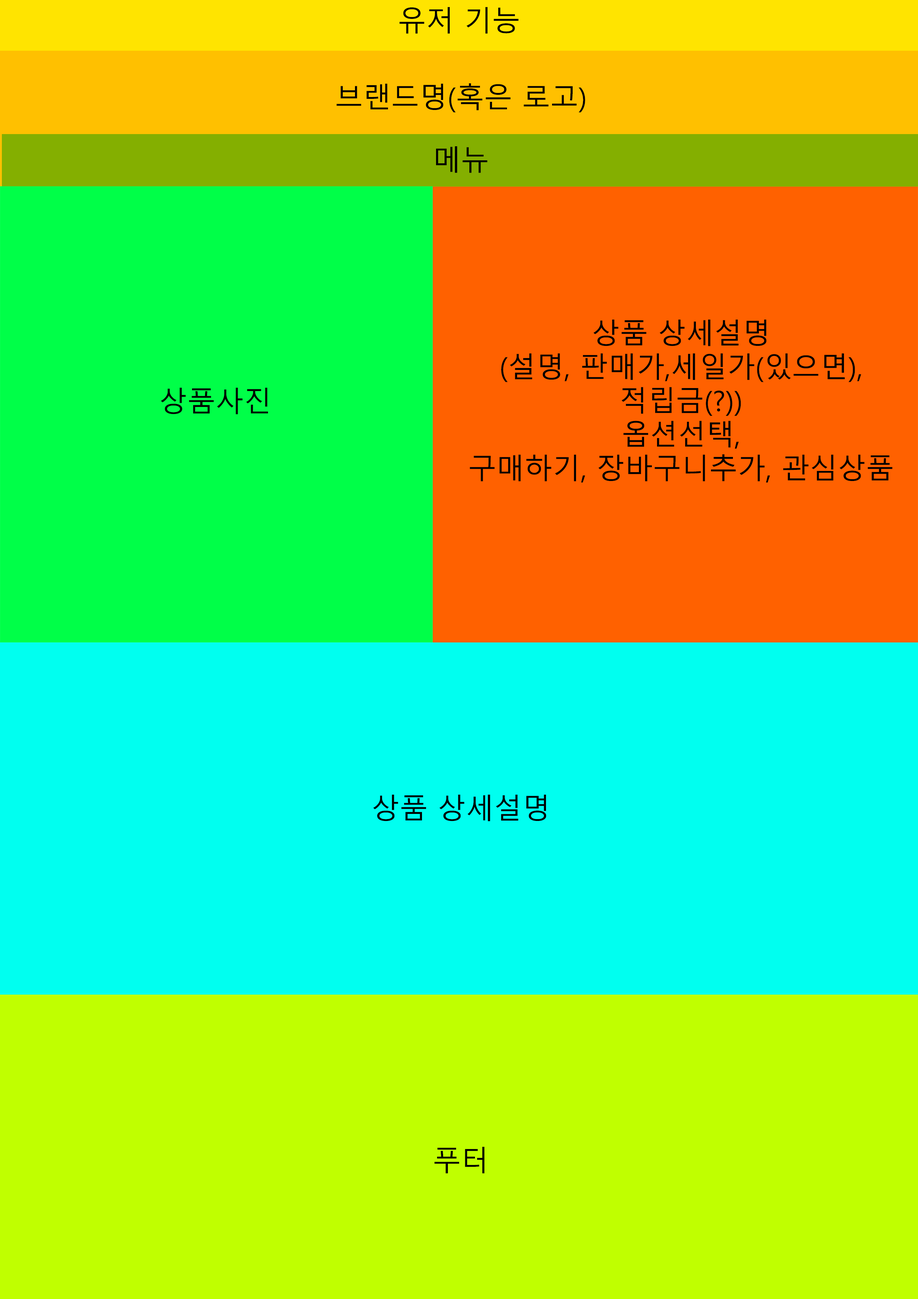
<style>
.page{position:relative;width:918px;height:1299px;background:#00fff0}
.page>*{position:absolute;margin:0}
.t1{font:28.1px "MalgunGothic";color:#000000}
</style>
<div class="page">
<p class="t1" style="left:399px;top:7px;width:120px;height:27px">유저 기능</p>
<p class="t1" style="left:337px;top:83px;width:248px;height:30px">브랜드명(혹은 로고)</p>
<p class="t1" style="left:436px;top:146px;width:52px;height:27px">메뉴</p>
<p class="t1" style="left:470px;top:320px;width:423px;height:162px;text-align:center">상품 상세설명<br>(설명, 판매가,세일가(있으면),<br>적립금(?))<br>옵션선택,<br>구매하기, 장바구니추가, 관심상품</p>
<p class="t1" style="left:161px;top:388px;width:107px;height:26px">상품사진</p>
<p class="t1" style="left:373px;top:794px;width:173px;height:27px">상품 상세설명</p>
<p class="t1" style="left:434px;top:1147px;width:51px;height:26px">푸터</p>
</div>
